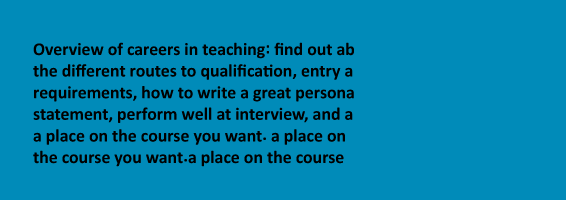
<style>
.page{position:relative;width:566px;height:200px;background:#008bb9}
.page>*{position:absolute;margin:0}
.t1{font:18px "Calibri-Bold";color:#000000}
</style>
<div class="page">
<p class="t1" style="left:33px;top:42px;width:321px;height:125px">Overview of careers in teaching: find out ab<br>the different routes to qualification, entry a<br>requirements, how to write a great persona<br>statement, perform well at interview, and a<br>a place on the course you want. a place on <br>the course you want.a place on the course</p>
</div>
